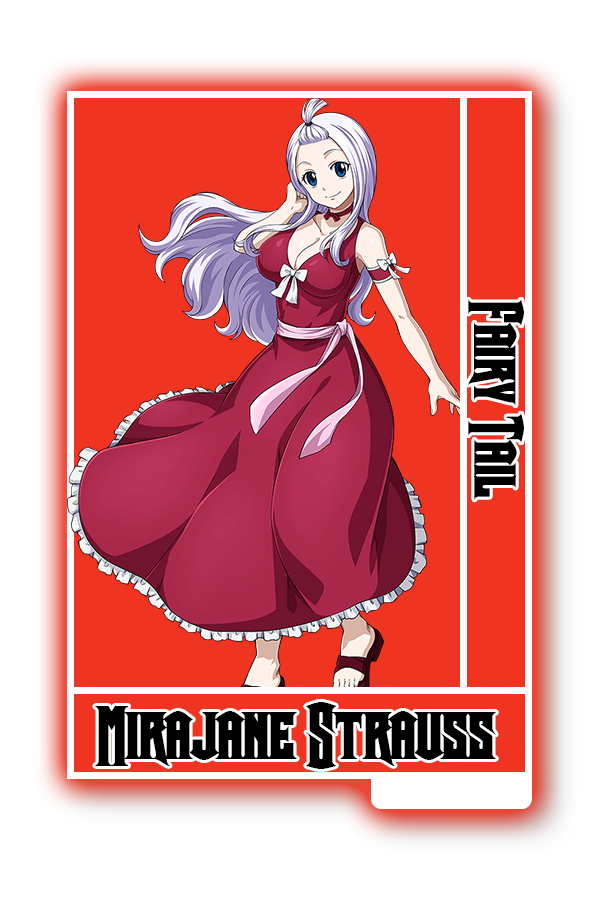
<style>
.page{position:relative;width:600px;height:900px;background:#ffffff}
.page>*{position:absolute;margin:0}
.t1{font:61.5px "Crown-Title";color:#000000}
.t2{font:70.1px "Crown-Title";color:#000000}
</style>
<div class="page">
<p class="t1" style="left:468px;top:299px;width:56px;height:201px;rotate:90deg">Fairy Tail</p>
<p class="t2" style="left:95px;top:702px;width:401px;height:67px">Mirajane Strauss</p>
</div>
